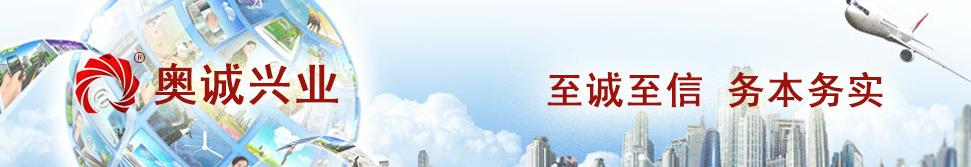
<style>
.page{position:relative;width:971px;height:167px}
.page>*{position:absolute;margin:0}
.t1{font:8px "SimHei";letter-spacing:0.025em;color:#9c1309;font-weight:bold}
.t2{font:45px "SimHei";letter-spacing:0.025em;color:#9c1309;font-weight:bold}
.t3{font:38px "SimHei";letter-spacing:0.025em;color:#9c1309;font-weight:bold}
</style>
<div class="page">
<p class="t1" style="left:138px;top:54px;width:4px;height:6px">R</p>
<p class="t2" style="left:154px;top:62px;width:184px;height:43px">奥诚兴业</p>
<p class="t3" style="left:547px;top:72px;width:336px;height:36px">至诚至信 务本务实</p>
</div>
